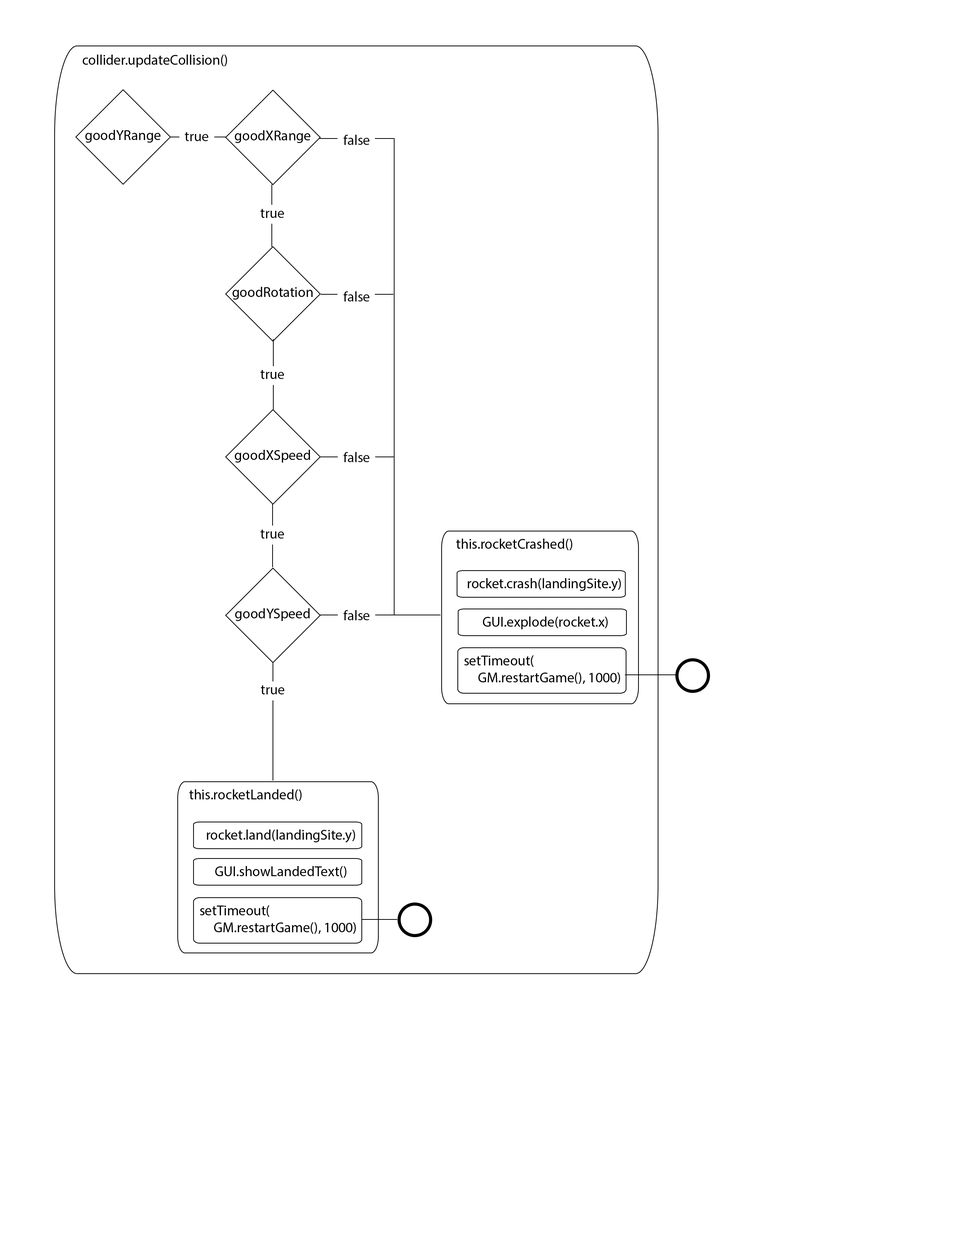
<style>
.page{position:relative;width:960px;height:1242px;background:#ffffff}
.page>*{position:absolute;margin:0}
.t1{font:14.1px "MyriadPro-Regular";color:#000000}
</style>
<div class="page">
<p class="t1" style="left:82px;top:55px;width:145px;height:12px">collider.updateCollision()</p>
<p class="t1" style="left:85px;top:130px;width:76px;height:13px">goodYRange</p>
<p class="t1" style="left:185px;top:132px;width:24px;height:9px">true</p>
<p class="t1" style="left:235px;top:130px;width:76px;height:13px">goodXRange</p>
<p class="t1" style="left:343px;top:135px;width:27px;height:10px">false</p>
<p class="t1" style="left:260px;top:209px;width:24px;height:9px">true</p>
<p class="t1" style="left:232px;top:287px;width:81px;height:13px">goodRotation</p>
<p class="t1" style="left:343px;top:291px;width:27px;height:11px">false</p>
<p class="t1" style="left:260px;top:370px;width:24px;height:9px">true</p>
<p class="t1" style="left:235px;top:450px;width:75px;height:13px">goodXSpeed</p>
<p class="t1" style="left:343px;top:452px;width:27px;height:10px">false</p>
<p class="t1" style="left:260px;top:529px;width:24px;height:10px">true</p>
<p class="t1" style="left:456px;top:539px;width:116px;height:11px">this.rocketCrashed()</p>
<p class="t1" style="left:468px;top:578px;width:153px;height:13px">rocket.crash(landingSite.y)</p>
<p class="t1" style="left:235px;top:608px;width:75px;height:13px">goodYSpeed</p>
<p class="t1" style="left:343px;top:610px;width:27px;height:10px">false</p>
<p class="t1" style="left:483px;top:617px;width:125px;height:12px">GUI.explode(rocket.x)</p>
<p class="t1" style="left:464px;top:655px;width:156px;height:29px">setTimeout(<br>  GM.restartGame(), 1000)</p>
<p class="t1" style="left:261px;top:685px;width:24px;height:10px">true</p>
<p class="t1" style="left:189px;top:789px;width:113px;height:12px">this.rocketLanded()</p>
<p class="t1" style="left:207px;top:830px;width:148px;height:13px">rocket.land(landingSite.y)</p>
<p class="t1" style="left:215px;top:866px;width:131px;height:12px">GUI.showLandedText()</p>
<p class="t1" style="left:200px;top:905px;width:156px;height:29px">setTimeout(<br>  GM.restartGame(), 1000)</p>
</div>
